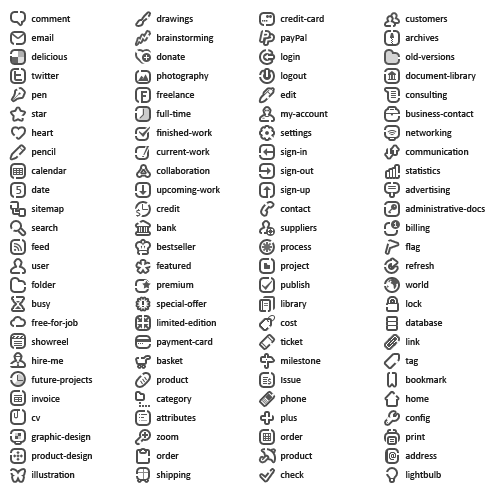
<style>
.page{position:relative;width:500px;height:494px;background:#ffffff}
.page>*{position:absolute;margin:0}
.t1{font:10px/19px "Calibri";color:#222222}
.t2{font:12px "Calibri";color:#545454}
.t3{font:10px "Calibri";color:#565656}
.t4{font:8px "Calibri";color:#555555}
.t5{font:9px "Tahoma";color:#4d4d4d}
</style>
<div class="page">
<p class="t1" style="left:31px;top:16px;width:62px;height:462px">comment<br>email<br>delicious<br>twitter<br>pen<br>star<br>heart<br>pencil<br>calendar<br>date<br>sitemap<br>search<br>feed<br>user<br>folder<br>busy<br>free-for-job<br>showreel<br>hire-me<br>future-projects<br>invoice<br>cv<br>graphic-design<br>product-design<br>illustration</p>
<p class="t1" style="left:156px;top:15px;width:64px;height:465px">drawings<br>brainstorming<br>donate<br>photography<br>freelance<br>full-time<br>finished-work<br>current-work<br>collaboration<br>upcoming-work<br>credit<br>bank<br>bestseller<br>featured<br>premium<br>special-offer<br>limited-edition<br>payment-card<br>basket<br>product<br>category<br>attributes<br>zoom<br>order<br>shipping</p>
<p class="t1" style="left:280px;top:15px;width:48px;height:463px">credit-card<br>payPal<br>login<br>logout<br>edit<br>my-account<br>settings<br>sign-in<br>sign-out<br>sign-up<br>contact<br>suppliers<br>process<br>project<br>publish<br>library<br>cost<br>ticket<br>milestone<br>Issue<br>phone<br>plus<br>order<br>product<br>check</p>
<p class="t1" style="left:405px;top:16px;width:80px;height:464px">customers<br>archives<br>old-versions<br>document-library<br>consulting<br>business-contact<br>networking<br>communication<br>statistics<br>advertising<br>administrative-docs<br>billing<br>flag<br>refresh<br>world<br>lock<br>database<br>link<br>tag<br>bookmark<br>home<br>config<br>print<br>address<br>lightbulb</p>
<p class="t2" style="left:16px;top:186px;width:6px;height:8px">5</p>
<p class="t3" style="left:136px;top:209px;width:5px;height:8px">$</p>
<p class="t4" style="left:267px;top:378px;width:5px;height:7px">$</p>
<p class="t5" style="left:389px;top:452px;width:7px;height:8px">@</p>
</div>
